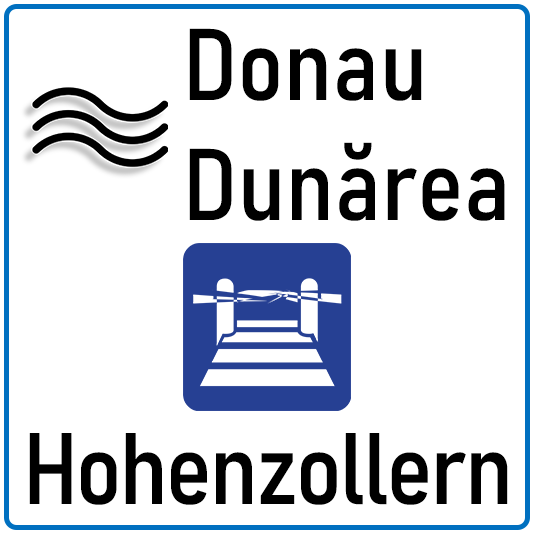
<style>
.page{position:relative;width:533px;height:533px;background:#ffffff}
.page>*{position:absolute;margin:0}
.t1{font:100px "Bahnschrift-SemiCondensed";color:#000000}
.t2{font:100px "Bahnschrift-SemiCondensed";letter-spacing:-0.025em;color:#000000}
</style>
<div class="page">
<p class="t1" style="left:189px;top:28px;width:316px;height:193px">Donau<br>Dunărea</p>
<p class="t2" style="left:29px;top:433px;width:479px;height:72px">Hohenzollern</p>
</div>
